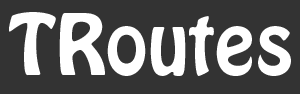
<style>
.page{position:relative;width:300px;height:94px;background:#333333}
.page>*{position:absolute;margin:0}
.t1{font:75px "HoboStd";color:#ffffff}
</style>
<div class="page">
<p class="t1" style="left:9px;top:12px;width:282px;height:64px">TRoutes</p>
</div>
